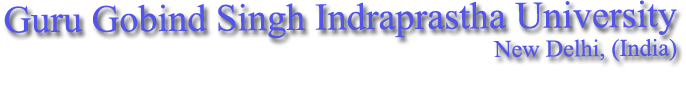
<style>
.page{position:relative;width:686px;height:86px;background:#ffffff}
.page>*{position:absolute;margin:0}
.t1{font:38px "TimesNewRomanPSMT";color:#5255e7}
.t2{font:24px "TimesNewRomanPSMT";color:#5255e7}
</style>
<div class="page">
<p class="t1" style="left:4px;top:0px;width:673px;height:62px">Guru Gobind Singh Indraprastha University <span class="t2">New Delhi, (India)</span></p>
</div>
